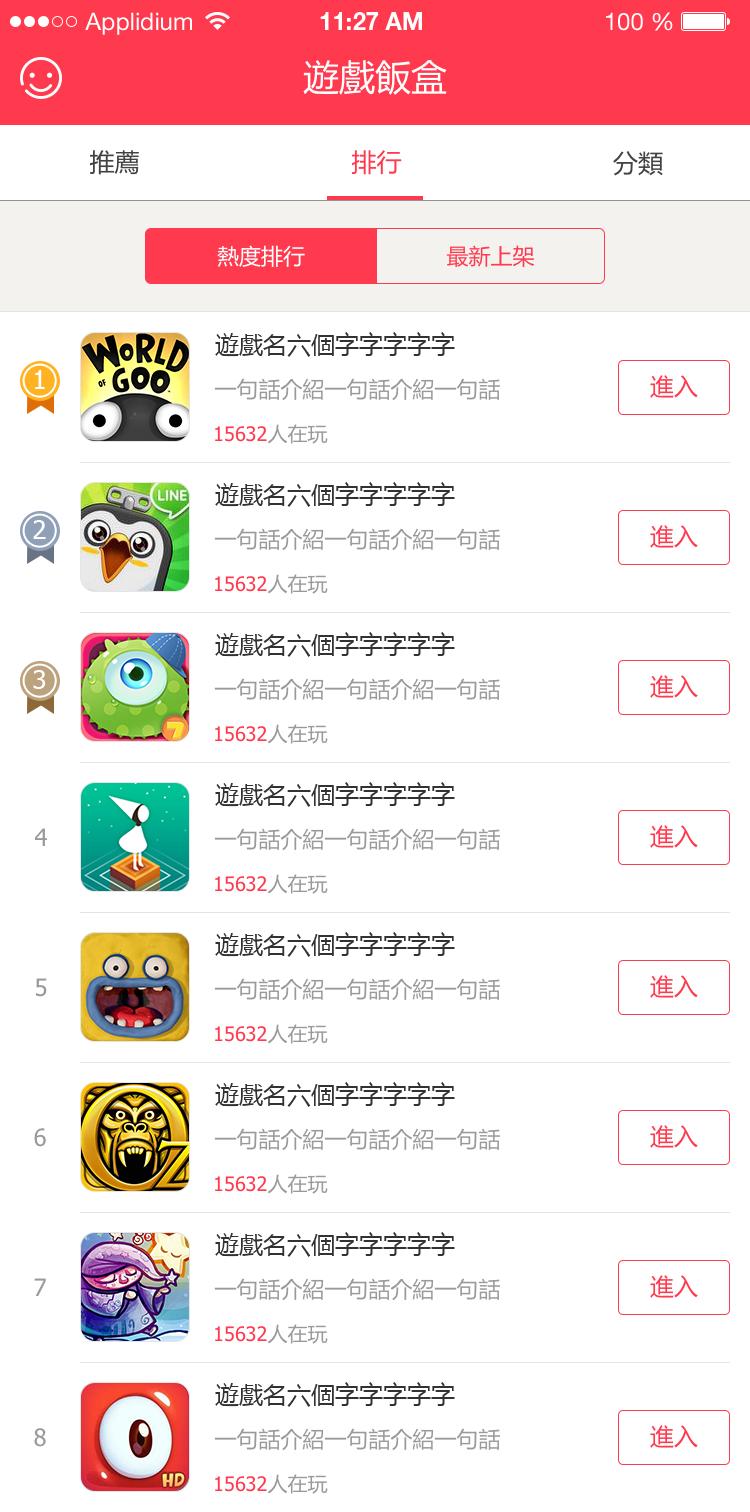
<style>
.page{position:relative;width:750px;height:1512px;background:#ffffff}
.page>*{position:absolute;margin:0}
.t1{font:24px "HelveticaNeueLTStd-Roman";color:#ffffff}
.t2{font:24px "HelveticaNeueLTStd-Bd";color:#ffffff}
.t3{font:36px "MicrosoftYaHei";color:#ffffff}
.t4{font:25px "MicrosoftYaHei";color:#424242}
.t5{font:25px "MicrosoftYaHei";color:#ff3a4e}
.t6{font:22px "MicrosoftYaHei";color:#ffffff}
.t7{font:22px "MicrosoftYaHei";color:#ff3a4e}
.t8{font:24px "MicrosoftYaHei";color:#323232}
.t9{font:26.3px "Tahoma";color:#ffffff}
.t10{font:24px "MicrosoftYaHei";color:#ff3a4e}
.t11{font:22px "MicrosoftYaHei";color:#9a9a9a}
.t12{font:20px "Tahoma";color:#ff3a4e}
.t13{font:20px "MicrosoftYaHei";color:#9a9a9a}
.t14{font:24px "Tahoma";color:#9a9a9a}
</style>
<div class="page">
<p class="t1" style="left:85px;top:12px;width:107px;height:23px">Applidium</p>
<p class="t2" style="left:320px;top:12px;width:102px;height:18px">11:27 AM</p>
<p class="t1" style="left:606px;top:12px;width:67px;height:19px">100 %</p>
<p class="t3" style="left:303px;top:60px;width:144px;height:35px">遊戲飯盒</p>
<p class="t4" style="left:89px;top:150px;width:50px;height:25px">推薦</p>
<p class="t5" style="left:351px;top:150px;width:51px;height:25px">排行</p>
<p class="t4" style="left:613px;top:151px;width:50px;height:25px">分類</p>
<p class="t6" style="left:217px;top:245px;width:88px;height:22px">熱度排行</p>
<p class="t7" style="left:446px;top:245px;width:88px;height:22px">最新上架</p>
<p class="t8" style="left:215px;top:332px;width:240px;height:25px">遊戲名六個字字字字字</p>
<p class="t9" style="left:35px;top:370px;width:10px;height:19px">1</p>
<p class="t10" style="left:650px;top:375px;width:48px;height:23px">進入</p>
<p class="t11" style="left:214px;top:378px;width:286px;height:23px">一句話介紹一句話介紹一句話</p>
<p class="t12" style="left:215px;top:424px;width:113px;height:20px">15632<span class="t13">人在玩</span></p>
<p class="t8" style="left:215px;top:482px;width:240px;height:25px">遊戲名六個字字字字字</p>
<p class="t9" style="left:33px;top:520px;width:13px;height:19px">2</p>
<p class="t11" style="left:214px;top:528px;width:286px;height:23px">一句話介紹一句話介紹一句話</p>
<p class="t10" style="left:650px;top:525px;width:48px;height:23px">進入</p>
<p class="t12" style="left:215px;top:574px;width:113px;height:20px">15632<span class="t13">人在玩</span></p>
<p class="t8" style="left:215px;top:632px;width:240px;height:25px">遊戲名六個字字字字字</p>
<p class="t9" style="left:33px;top:670px;width:13px;height:19px">3</p>
<p class="t11" style="left:214px;top:678px;width:286px;height:23px">一句話介紹一句話介紹一句話</p>
<p class="t10" style="left:650px;top:675px;width:48px;height:23px">進入</p>
<p class="t12" style="left:215px;top:724px;width:113px;height:20px">15632<span class="t13">人在玩</span></p>
<p class="t8" style="left:215px;top:782px;width:240px;height:25px">遊戲名六個字字字字字</p>
<p class="t14" style="left:35px;top:828px;width:12px;height:18px">4</p>
<p class="t11" style="left:214px;top:828px;width:286px;height:23px">一句話介紹一句話介紹一句話</p>
<p class="t10" style="left:650px;top:825px;width:48px;height:23px">進入</p>
<p class="t12" style="left:215px;top:874px;width:113px;height:20px">15632<span class="t13">人在玩</span></p>
<p class="t8" style="left:215px;top:932px;width:240px;height:25px">遊戲名六個字字字字字</p>
<p class="t10" style="left:650px;top:975px;width:48px;height:23px">進入</p>
<p class="t14" style="left:35px;top:978px;width:12px;height:19px">5</p>
<p class="t11" style="left:214px;top:978px;width:286px;height:23px">一句話介紹一句話介紹一句話</p>
<p class="t12" style="left:215px;top:1024px;width:113px;height:20px">15632<span class="t13">人在玩</span></p>
<p class="t8" style="left:215px;top:1082px;width:240px;height:25px">遊戲名六個字字字字字</p>
<p class="t14" style="left:34px;top:1128px;width:12px;height:19px">6</p>
<p class="t11" style="left:214px;top:1128px;width:286px;height:23px">一句話介紹一句話介紹一句話</p>
<p class="t10" style="left:650px;top:1125px;width:48px;height:23px">進入</p>
<p class="t12" style="left:215px;top:1174px;width:113px;height:20px">15632<span class="t13">人在玩</span></p>
<p class="t8" style="left:215px;top:1232px;width:240px;height:25px">遊戲名六個字字字字字</p>
<p class="t14" style="left:34px;top:1278px;width:12px;height:18px">7</p>
<p class="t11" style="left:214px;top:1278px;width:286px;height:23px">一句話介紹一句話介紹一句話</p>
<p class="t10" style="left:650px;top:1275px;width:48px;height:23px">進入</p>
<p class="t12" style="left:215px;top:1324px;width:113px;height:20px">15632<span class="t13">人在玩</span></p>
<p class="t8" style="left:215px;top:1382px;width:240px;height:25px">遊戲名六個字字字字字</p>
<p class="t14" style="left:34px;top:1428px;width:12px;height:19px">8</p>
<p class="t11" style="left:214px;top:1428px;width:286px;height:23px">一句話介紹一句話介紹一句話</p>
<p class="t10" style="left:650px;top:1425px;width:48px;height:23px">進入</p>
<p class="t12" style="left:215px;top:1474px;width:113px;height:20px">15632<span class="t13">人在玩</span></p>
</div>
